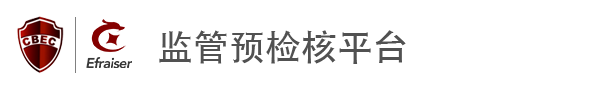
<style>
.page{position:relative;width:600px;height:95px;background:#ffffff}
.page>*{position:absolute;margin:0}
.t1{font:36px "STHeiti";color:#515151}
</style>
<div class="page">
<p class="t1" style="left:159px;top:30px;width:247px;height:34px">监管预检核平台</p>
</div>
